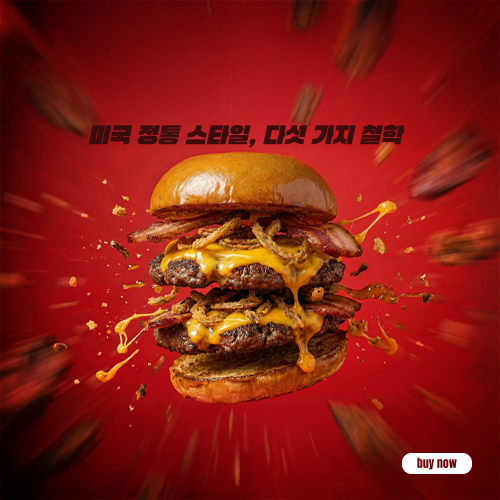
<style>
.page{position:relative;width:500px;height:500px}
.page>*{position:absolute;margin:0}
.t1{font:21px "TTSupersizeBki";letter-spacing:0.01em;color:#3c0c0c}
</style>
<div class="page">
<p class="t1" style="left:88px;top:124px;width:317px;height:24px">미국 정통 스타일, 다섯 가지 철학</p>
</div>
